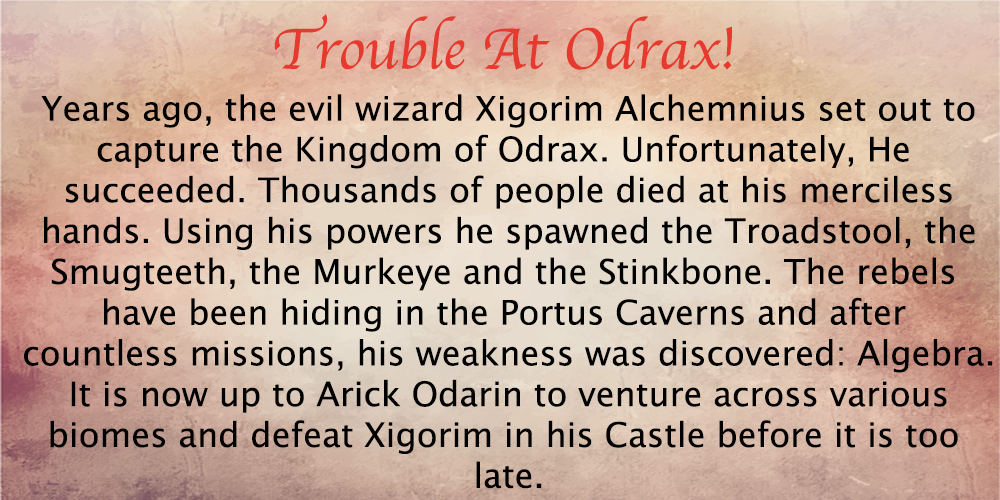
<style>
.page{position:relative;width:1000px;height:500px}
.page>*{position:absolute;margin:0}
.t1{font:60px "Apple-Chancery";color:#e63a2e}
.t2{font:34px "LucidaGrande";color:#000100}
</style>
<div class="page">
<p class="t1" style="left:274px;top:14px;width:458px;height:56px">Trouble At Odrax!</p>
<p class="t2" style="left:24px;top:94px;width:969px;height:395px;text-align:center">Years ago, the evil wizard Xigorim Alchemnius set out to<br>capture the Kingdom of Odrax. Unfortunately, He <br>succeeded. Thousands of people died at his merciless<br>hands. Using his powers he spawned the Troadstool, the<br>Smugteeth, the Murkeye and the Stinkbone. The rebels <br>have been hiding in the Portus Caverns and after <br>countless missions, his weakness was discovered: Algebra.<br>It is now up to Arick Odarin to venture across various<br>biomes and defeat Xigorim in his Castle before it is too <br>late.</p>
</div>
